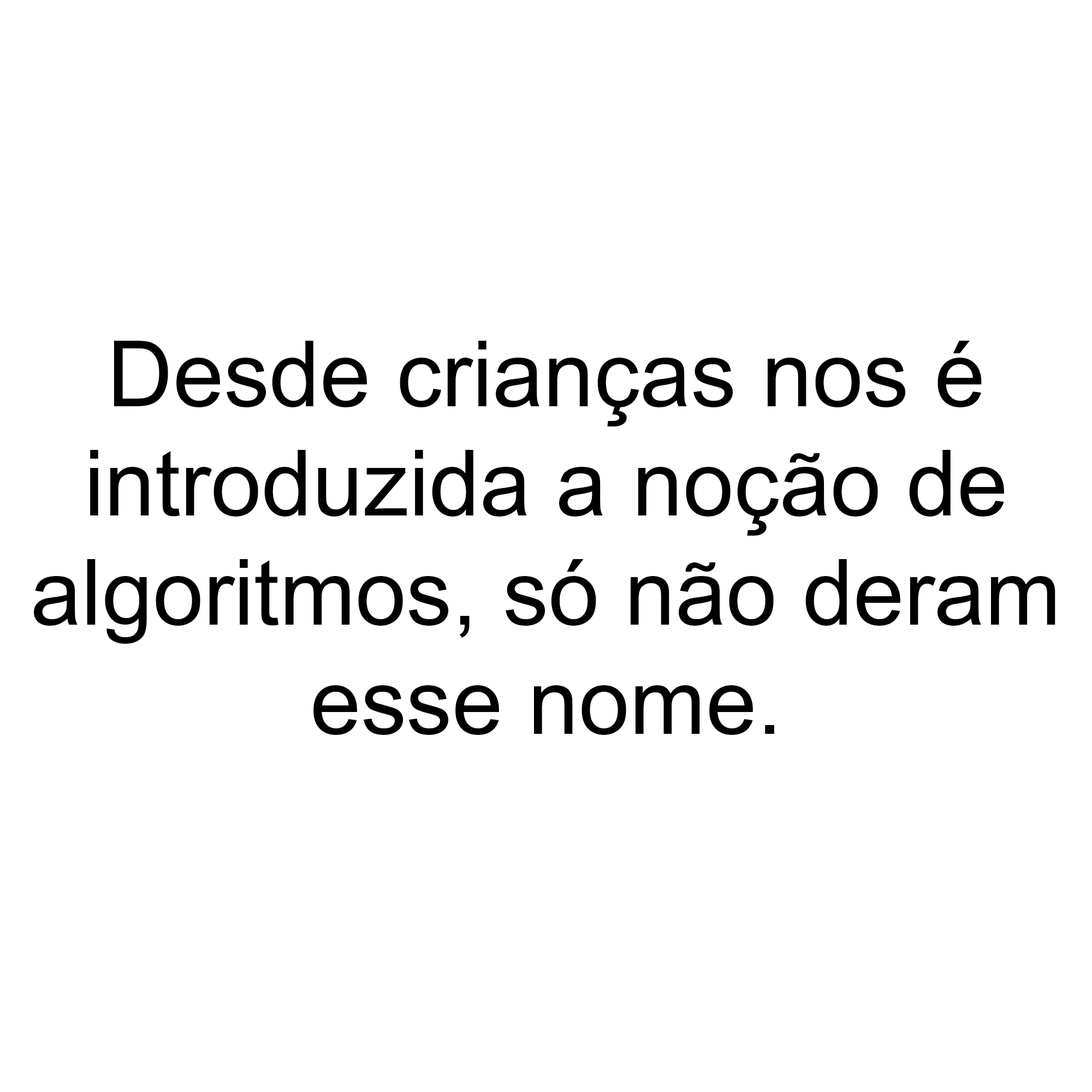
<style>
.page{position:relative;width:1092px;height:1092px;background:#ffffff}
.page>*{position:absolute;margin:0}
.t1{font:91px "ArialMT";color:#000000}
</style>
<div class="page">
<p class="t1" style="left:34px;top:341px;width:1021px;height:394px;text-align:center">Desde crianças nos é<br>introduzida a noção de<br>algoritmos, só não deram<br>esse nome.</p>
</div>
